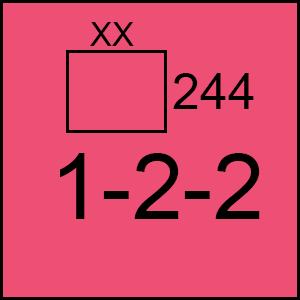
<style>
.page{position:relative;width:300px;height:300px;background:#ee4f74}
.page>*{position:absolute;margin:0}
.t1{font:33.3px "ArialMT";color:#000000}
.t2{font:50px "ArialMT";color:#000000}
.t3{font:91.7px "ArialMT";color:#000000}
</style>
<div class="page">
<p class="t1" style="left:90px;top:22px;width:44px;height:24px">XX</p>
<p class="t2" style="left:173px;top:73px;width:81px;height:36px">244</p>
<p class="t3" style="left:60px;top:153px;width:200px;height:66px">1-2-2</p>
</div>
